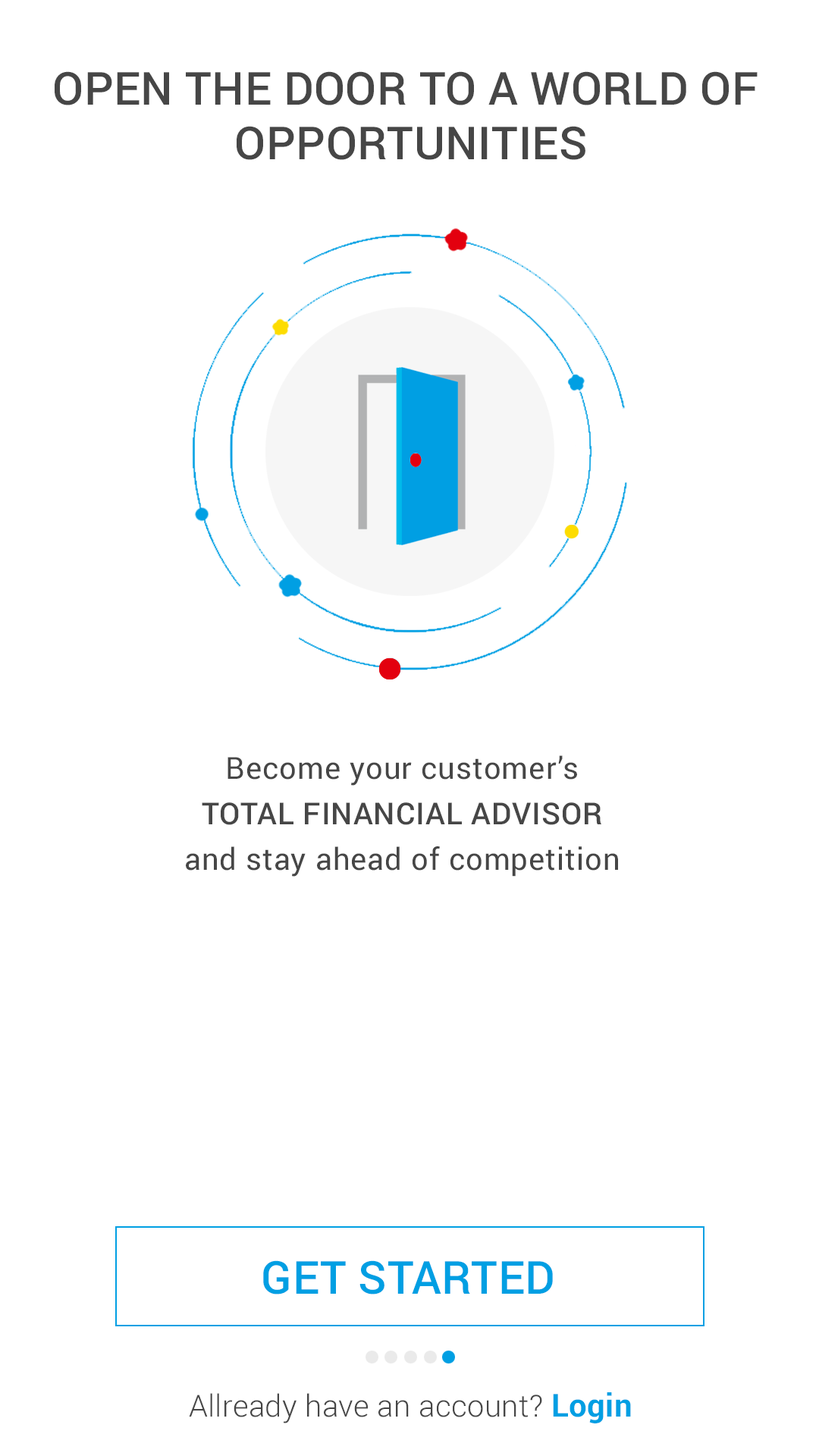
<style>
.page{position:relative;width:819px;height:1456px;background:#ffffff}
.page>*{position:absolute;margin:0}
.t1{font:45.5px "Roboto-Medium";letter-spacing:0.01em;color:#464646;text-transform:uppercase}
.t2{font:30.3px/45.5px "Roboto-Regular";letter-spacing:0.025em;color:#464646}
.t3{font:30.3px/45.5px "Roboto-Medium";letter-spacing:0.025em;color:#464646}
.t4{font:45.5px "Roboto-Medium";letter-spacing:0.01em;color:#009fe3;text-transform:uppercase}
.t5{font:30.3px "Roboto-Light";letter-spacing:0.01em;color:#464646}
.t6{font:31.8px "Roboto-Bold";letter-spacing:0.01em;color:#009fe3}
</style>
<div class="page">
<p class="t1" style="left:55px;top:71px;width:703px;height:89px;text-align:center">open the dooR to a world of <br>opportunities</p>
<p class="t2" style="left:186px;top:755px;width:432px;height:122px;text-align:justify">Become your customer’s <br><span class="t3">TOTAL FINANCIAL ADVISOR <br></span>and stay ahead of competition</p>
<p class="t4" style="left:263px;top:1260px;width:290px;height:34px">GET STARTED</p>
<p class="t5" style="left:189px;top:1392px;width:442px;height:31px">Allready have an account? <span class="t6">Login</span></p>
</div>
